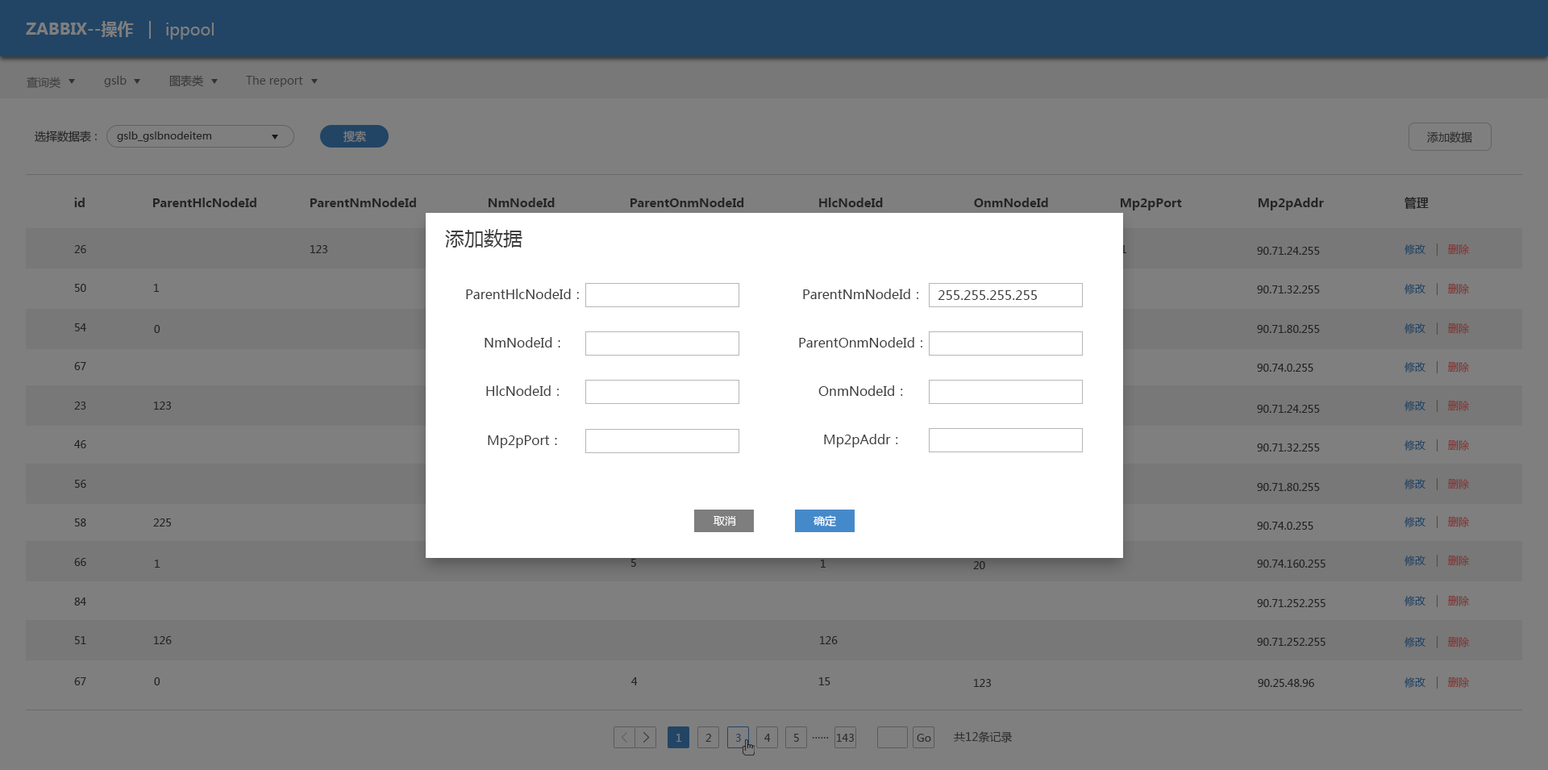
<style>
.page{position:relative;width:1548px;height:770px;background:#7f7f7f}
.page>*{position:absolute;margin:0}
.t1{font:16.1px "MicrosoftYaHei-Bold";color:#7f7f7f}
.t2{font:16.1px "MicrosoftYaHei";color:#7f7f7f}
.t3{font:11.3px "MicrosoftYaHei";color:#3b3b3b}
.t4{font:11.3px "MicrosoftYaHei";color:#3a3a3a}
.t5{font:11.3px "MicrosoftYaHei";color:#252525}
.t6{font:10.5px "MicrosoftYaHei";color:#252525}
.t7{font:11.3px "MicrosoftYaHei";color:#7f7f7f}
.t8{font:11.3px "MicrosoftYaHei";color:#2e2e2e}
.t9{font:12.1px "MicrosoftYaHei-Bold";color:#252525}
.t10{font:19.4px "MicrosoftYaHei";color:#3e3e3e}
.t11{font:10.5px "MicrosoftYaHei";color:#232323}
.t12{font:10.5px "MicrosoftYaHei"}
.t13{font:10.5px "MicrosoftYaHei";color:#224565}
.t14{font:10.5px "MicrosoftYaHei";color:#7f3c3c}
.t15{font:12.9px "MicrosoftYaHei";color:#3e3e3e}
.t16{font:11.3px "MicrosoftYaHei";color:#ffffff}
.t17{font:10.5px "MicrosoftYaHei";color:#1d1d1d}
.t18{font:10.5px "MicrosoftYaHei";color:#202020}
.t19{font:10.5px "MicrosoftYaHei";color:#1f1f1f}
.t20{font:10.5px "MicrosoftYaHei";color:#7f7f7f}
.t21{font:10.5px "MicrosoftYaHei";color:#2d2d2d}
.t22{font:11.3px "MicrosoftYaHei";color:#2d2d2d}
</style>
<div class="page">
<p class="t1" style="left:26px;top:21px;width:108px;height:16px">ZABBIX--操作</p>
<p class="t2" style="left:166px;top:23px;width:48px;height:17px">ippool</p>
<p class="t3" style="left:27px;top:77px;width:33px;height:12px;opacity:0.7">查询类</p>
<p class="t4" style="left:104px;top:76px;width:23px;height:11px">gslb</p>
<p class="t4" style="left:169px;top:75px;width:34px;height:12px">图表类</p>
<p class="t4" style="left:246px;top:76px;width:57px;height:11px">The report</p>
<p class="t5" style="left:35px;top:131px;width:62px;height:12px">选择数据表 :</p>
<p class="t6" style="left:117px;top:131px;width:95px;height:11px">gslb_gslbnodeitem</p>
<p class="t7" style="left:344px;top:131px;width:22px;height:12px">搜索</p>
<p class="t8" style="left:1427px;top:131px;width:46px;height:13px">添加数据</p>
<p class="t9" style="left:74px;top:198px;width:11px;height:9px">id</p>
<p class="t9" style="left:153px;top:198px;width:103px;height:9px">ParentHlcNodeId</p>
<p class="t9" style="left:310px;top:198px;width:106px;height:9px">ParentNmNodeId</p>
<p class="t9" style="left:489px;top:198px;width:66px;height:9px">NmNodeId</p>
<p class="t9" style="left:631px;top:198px;width:113px;height:9px">ParentOnmNodeId</p>
<p class="t9" style="left:819px;top:198px;width:64px;height:9px">HlcNodeId</p>
<p class="t9" style="left:974px;top:198px;width:74px;height:9px">OnmNodeId</p>
<p class="t9" style="left:1259px;top:198px;width:65px;height:12px">Mp2pAddr</p>
<p class="t9" style="left:1405px;top:197px;width:24px;height:12px">管理</p>
<p class="t9" style="left:1121px;top:198px;width:61px;height:12px">Mp2pPort</p>
<p class="t10" style="left:445px;top:229px;width:78px;height:19px">添加数据</p>
<p class="t11" style="left:74px;top:245px;width:12px;height:8px">26</p>
<p class="t11" style="left:310px;top:245px;width:17px;height:8px">123</p>
<p class="t12" style="left:1122px;top:245px;width:5px;height:8px">1</p>
<p class="t13" style="left:1405px;top:244px;width:21px;height:11px">修改</p>
<p class="t14" style="left:1448px;top:244px;width:21px;height:11px">删除</p>
<p class="t11" style="left:1257px;top:247px;width:63px;height:8px">90.71.24.255</p>
<p class="t11" style="left:75px;top:284px;width:11px;height:8px">50</p>
<p class="t11" style="left:154px;top:284px;width:5px;height:8px">1</p>
<p class="t15" style="left:466px;top:289px;width:113px;height:10px">ParentHlcNodeId：</p>
<p class="t15" style="left:803px;top:289px;width:116px;height:10px">ParentNmNodeId：</p>
<p class="t15" style="left:938px;top:290px;width:100px;height:10px">255.255.255.255</p>
<p class="t11" style="left:1257px;top:285px;width:63px;height:9px">90.71.32.255</p>
<p class="t13" style="left:1405px;top:284px;width:21px;height:10px">修改</p>
<p class="t14" style="left:1448px;top:284px;width:21px;height:10px">删除</p>
<p class="t11" style="left:75px;top:323px;width:11px;height:8px">54</p>
<p class="t11" style="left:154px;top:325px;width:6px;height:8px">0</p>
<p class="t11" style="left:1257px;top:325px;width:63px;height:8px">90.71.80.255</p>
<p class="t13" style="left:1405px;top:323px;width:21px;height:11px">修改</p>
<p class="t14" style="left:1448px;top:323px;width:21px;height:11px">删除</p>
<p class="t15" style="left:485px;top:337px;width:75px;height:11px">NmNodeId：</p>
<p class="t15" style="left:799px;top:337px;width:124px;height:11px">ParentOnmNodeId：</p>
<p class="t11" style="left:74px;top:362px;width:12px;height:8px">67</p>
<p class="t11" style="left:1257px;top:364px;width:57px;height:8px">90.74.0.255</p>
<p class="t13" style="left:1405px;top:362px;width:21px;height:11px">修改</p>
<p class="t14" style="left:1448px;top:362px;width:21px;height:11px">删除</p>
<p class="t15" style="left:486px;top:385px;width:73px;height:11px">HlcNodeId：</p>
<p class="t15" style="left:819px;top:385px;width:84px;height:11px">OnmNodeId：</p>
<p class="t11" style="left:74px;top:402px;width:12px;height:8px">23</p>
<p class="t11" style="left:154px;top:402px;width:17px;height:8px">123</p>
<p class="t13" style="left:1405px;top:401px;width:21px;height:10px">修改</p>
<p class="t14" style="left:1448px;top:401px;width:21px;height:10px">删除</p>
<p class="t11" style="left:1257px;top:405px;width:63px;height:8px">90.71.24.255</p>
<p class="t15" style="left:488px;top:435px;width:69px;height:13px">Mp2pPort：</p>
<p class="t15" style="left:824px;top:434px;width:74px;height:14px">Mp2pAddr：</p>
<p class="t11" style="left:74px;top:440px;width:12px;height:8px">46</p>
<p class="t11" style="left:1257px;top:444px;width:63px;height:8px">90.71.32.255</p>
<p class="t13" style="left:1405px;top:440px;width:21px;height:11px">修改</p>
<p class="t14" style="left:1448px;top:440px;width:21px;height:11px">删除</p>
<p class="t11" style="left:75px;top:480px;width:11px;height:8px">56</p>
<p class="t11" style="left:1257px;top:483px;width:63px;height:8px">90.71.80.255</p>
<p class="t13" style="left:1405px;top:479px;width:21px;height:11px">修改</p>
<p class="t14" style="left:1448px;top:479px;width:21px;height:11px">删除</p>
<p class="t11" style="left:75px;top:519px;width:11px;height:8px">58</p>
<p class="t11" style="left:153px;top:519px;width:18px;height:8px">225</p>
<p class="t16" style="left:714px;top:516px;width:22px;height:10px">取消</p>
<p class="t16" style="left:814px;top:515px;width:22px;height:12px">确定</p>
<p class="t11" style="left:1257px;top:522px;width:57px;height:8px">90.74.0.255</p>
<p class="t13" style="left:1405px;top:517px;width:21px;height:10px">修改</p>
<p class="t14" style="left:1448px;top:517px;width:21px;height:10px">删除</p>
<p class="t13" style="left:1405px;top:556px;width:21px;height:10px">修改</p>
<p class="t14" style="left:1448px;top:556px;width:21px;height:10px">删除</p>
<p class="t11" style="left:74px;top:558px;width:12px;height:8px">66</p>
<p class="t11" style="left:155px;top:560px;width:5px;height:8px">1</p>
<p class="t17" style="left:631px;top:559px;width:5px;height:8px">5</p>
<p class="t18" style="left:821px;top:560px;width:5px;height:8px">1</p>
<p class="t19" style="left:973px;top:561px;width:12px;height:8px">20</p>
<p class="t11" style="left:1257px;top:560px;width:69px;height:8px">90.74.160.255</p>
<p class="t11" style="left:74px;top:598px;width:12px;height:8px">84</p>
<p class="t11" style="left:1257px;top:599px;width:69px;height:8px">90.71.252.255</p>
<p class="t13" style="left:1405px;top:596px;width:21px;height:10px">修改</p>
<p class="t14" style="left:1448px;top:596px;width:21px;height:10px">删除</p>
<p class="t11" style="left:75px;top:636px;width:11px;height:8px">51</p>
<p class="t11" style="left:154px;top:636px;width:18px;height:8px">126</p>
<p class="t11" style="left:820px;top:636px;width:18px;height:8px">126</p>
<p class="t11" style="left:1257px;top:638px;width:69px;height:8px">90.71.252.255</p>
<p class="t13" style="left:1405px;top:637px;width:21px;height:11px">修改</p>
<p class="t14" style="left:1448px;top:637px;width:21px;height:11px">删除</p>
<p class="t11" style="left:74px;top:677px;width:12px;height:8px">67</p>
<p class="t11" style="left:154px;top:677px;width:6px;height:8px">0</p>
<p class="t11" style="left:631px;top:677px;width:7px;height:8px">4</p>
<p class="t11" style="left:819px;top:677px;width:12px;height:8px">15</p>
<p class="t13" style="left:1405px;top:677px;width:21px;height:11px">修改</p>
<p class="t14" style="left:1448px;top:677px;width:21px;height:11px">删除</p>
<p class="t11" style="left:974px;top:679px;width:17px;height:8px">123</p>
<p class="t11" style="left:1258px;top:679px;width:56px;height:8px">90.25.48.96</p>
<p class="t20" style="left:677px;top:734px;width:4px;height:8px">1</p>
<p class="t21" style="left:706px;top:734px;width:5px;height:8px">2</p>
<p class="t13" style="left:735px;top:734px;width:6px;height:8px">3</p>
<p class="t21" style="left:764px;top:734px;width:7px;height:8px">4</p>
<p class="t21" style="left:794px;top:734px;width:5px;height:8px">5</p>
<p class="t21" style="left:812px;top:737px;width:17px;height:2px">……</p>
<p class="t21" style="left:837px;top:734px;width:17px;height:8px">143</p>
<p class="t21" style="left:917px;top:734px;width:14px;height:8px">Go</p>
<p class="t22" style="left:954px;top:731px;width:59px;height:12px">共12条记录</p>
</div>
